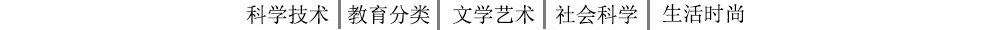
<style>
.page{position:relative;width:1000px;height:30px;background:#ffffff}
.page>*{position:absolute;margin:0}
.t1{font:20.8px "SimSun";color:#000000}
</style>
<div class="page">
<p class="t1" style="left:246px;top:4px;width:83px;height:21px">科学技术</p>
<p class="t1" style="left:348px;top:4px;width:82px;height:21px">教育分类</p>
<p class="t1" style="left:452px;top:4px;width:83px;height:21px">文学艺术</p>
<p class="t1" style="left:555px;top:4px;width:83px;height:21px">社会科学</p>
<p class="t1" style="left:662px;top:3px;width:82px;height:21px">生活时尚</p>
</div>
